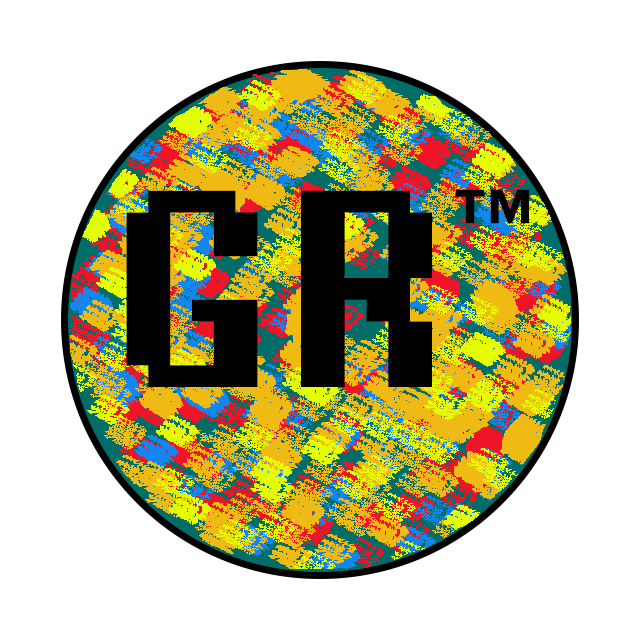
<style>
.page{position:relative;width:640px;height:640px;background:#ffffff}
.page>*{position:absolute;margin:0}
.t1{font:279.2px "Fixedsys";color:#000000}
.t2{font:279.2px "BradleyHandITC";color:#000000}
</style>
<div class="page">
<p class="t1" style="left:126px;top:189px;width:403px;height:198px">GR<span class="t2">™</span></p>
</div>
